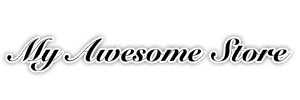
<style>
.page{position:relative;width:300px;height:100px;background:#ffffff}
.page>*{position:absolute;margin:0}
.t1{font:31px "SnellRoundhand-BlackScript";color:#000000}
</style>
<div class="page">
<p class="t1" style="left:7px;top:38px;width:284px;height:33px">My Awesome Store</p>
</div>
